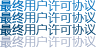
<style>
.page{position:relative;width:96px;height:48px;background:#ffffff}
.page>*{position:absolute;margin:0}
.t1{font:12px "MicrosoftYaHeiLight";color:#006fbc}
.t2{font:12px "MicrosoftYaHeiLight";color:#005895}
.t3{font:12px "MicrosoftYaHeiLight";color:#00416e}
.t4{font:12px "MicrosoftYaHeiLight";color:#a2aec7}
</style>
<div class="page">
<p class="t1" style="left:0px;top:0px;width:96px;height:12px">最终用户许可协议</p>
<p class="t2" style="left:0px;top:11px;width:96px;height:13px">最终用户许可协议</p>
<p class="t3" style="left:0px;top:23px;width:96px;height:13px">最终用户许可协议</p>
<p class="t4" style="left:0px;top:35px;width:96px;height:13px">最终用户许可协议</p>
</div>
